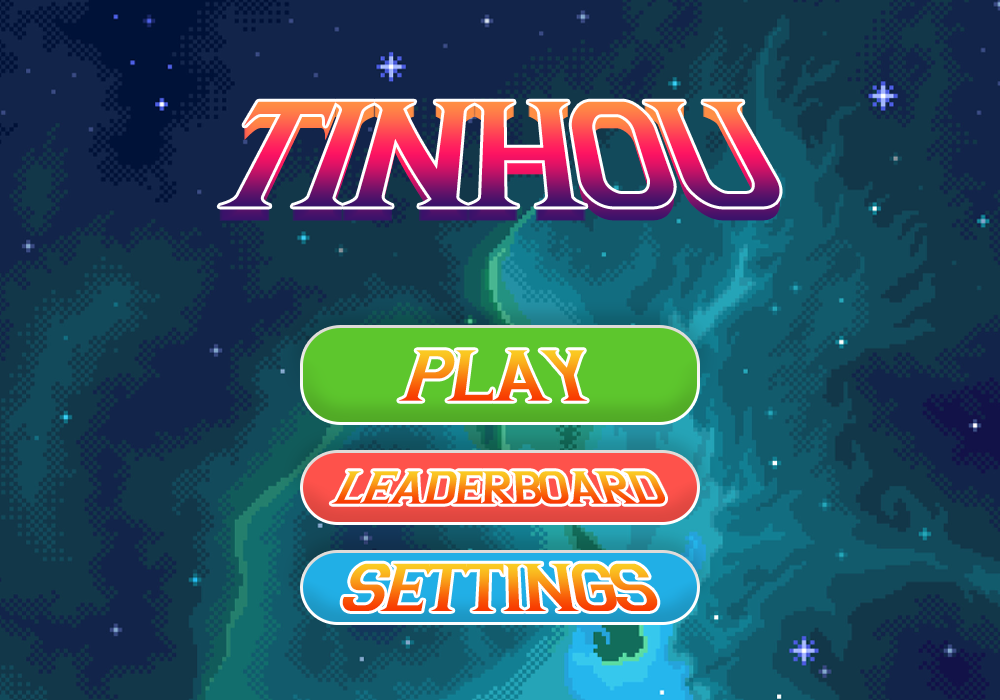
<style>
.page{position:relative;width:1000px;height:700px}
.page>*{position:absolute;margin:0}
.t1{font:147px "Argentina";letter-spacing:-0.04em}
.t2{font:70.6px "Argentina";letter-spacing:-0.04em}
.t3{font:45.1px "Argentina";letter-spacing:-0.04em}
.t4{font:66.2px "Argentina";letter-spacing:-0.04em}
</style>
<div class="page">
<p class="t1" style="left:219px;top:102px;width:561px;height:106px">TINHOU</p>
<p class="t1" style="left:219px;top:101px;width:561px;height:106px">TINHOU</p>
<p class="t1" style="left:219px;top:103px;width:561px;height:106px">TINHOU</p>
<p class="t1" style="left:219px;top:104px;width:561px;height:106px">TINHOU</p>
<p class="t1" style="left:219px;top:105px;width:561px;height:106px">TINHOU</p>
<p class="t1" style="left:219px;top:106px;width:561px;height:106px">TINHOU</p>
<p class="t1" style="left:219px;top:107px;width:561px;height:106px">TINHOU</p>
<p class="t1" style="left:219px;top:108px;width:561px;height:106px">TINHOU</p>
<p class="t1" style="left:219px;top:109px;width:561px;height:106px">TINHOU</p>
<p class="t1" style="left:219px;top:110px;width:561px;height:106px">TINHOU</p>
<p class="t1" style="left:219px;top:111px;width:561px;height:106px">TINHOU</p>
<p class="t1" style="left:219px;top:112px;width:561px;height:106px">TINHOU</p>
<p class="t1" style="left:219px;top:113px;width:561px;height:106px">TINHOU</p>
<p class="t1" style="left:219px;top:114px;width:561px;height:106px">TINHOU</p>
<p class="t1" style="left:219px;top:115px;width:561px;height:106px">TINHOU</p>
<p class="t2" style="left:399px;top:350px;width:188px;height:51px">PLAY</p>
<p class="t3" style="left:331px;top:471px;width:334px;height:33px">LEADERBOARD</p>
<p class="t4" style="left:342px;top:563px;width:316px;height:48px">SETTINGS</p>
</div>
